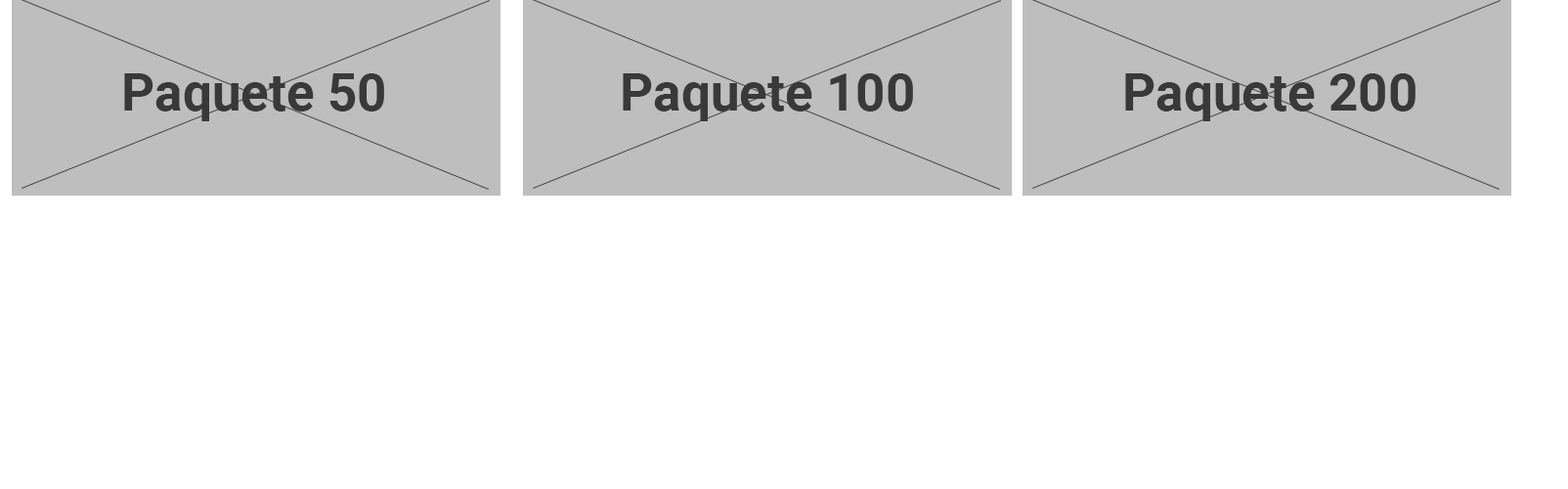
<style>
.page{position:relative;width:1568px;height:489px;background:#ffffff}
.page>*{position:absolute;margin:0}
.t1{font:51.9px "Roboto-Bold";color:#393939}
</style>
<div class="page">
<p class="t1" style="left:124px;top:73px;width:260px;height:48px">Paquete 50</p>
<p class="t1" style="left:623px;top:73px;width:290px;height:48px">Paquete 100</p>
<p class="t1" style="left:1125px;top:73px;width:291px;height:48px">Paquete 200</p>
</div>
